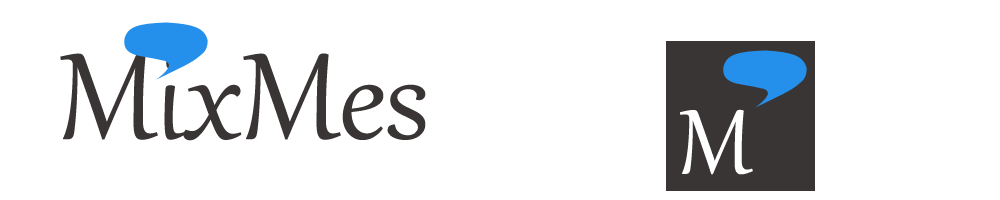
<style>
.page{position:relative;width:1000px;height:200px;background:#ffffff}
.page>*{position:absolute;margin:0}
.t1{font:150px "Gabriola";color:#3a3535}
.t2{font:112px "Gabriola";color:#ffffff}
</style>
<div class="page">
<p class="t1" style="left:60px;top:53px;width:366px;height:88px">MixMes</p>
<p class="t2" style="left:680px;top:109px;width:73px;height:66px">M</p>
</div>
